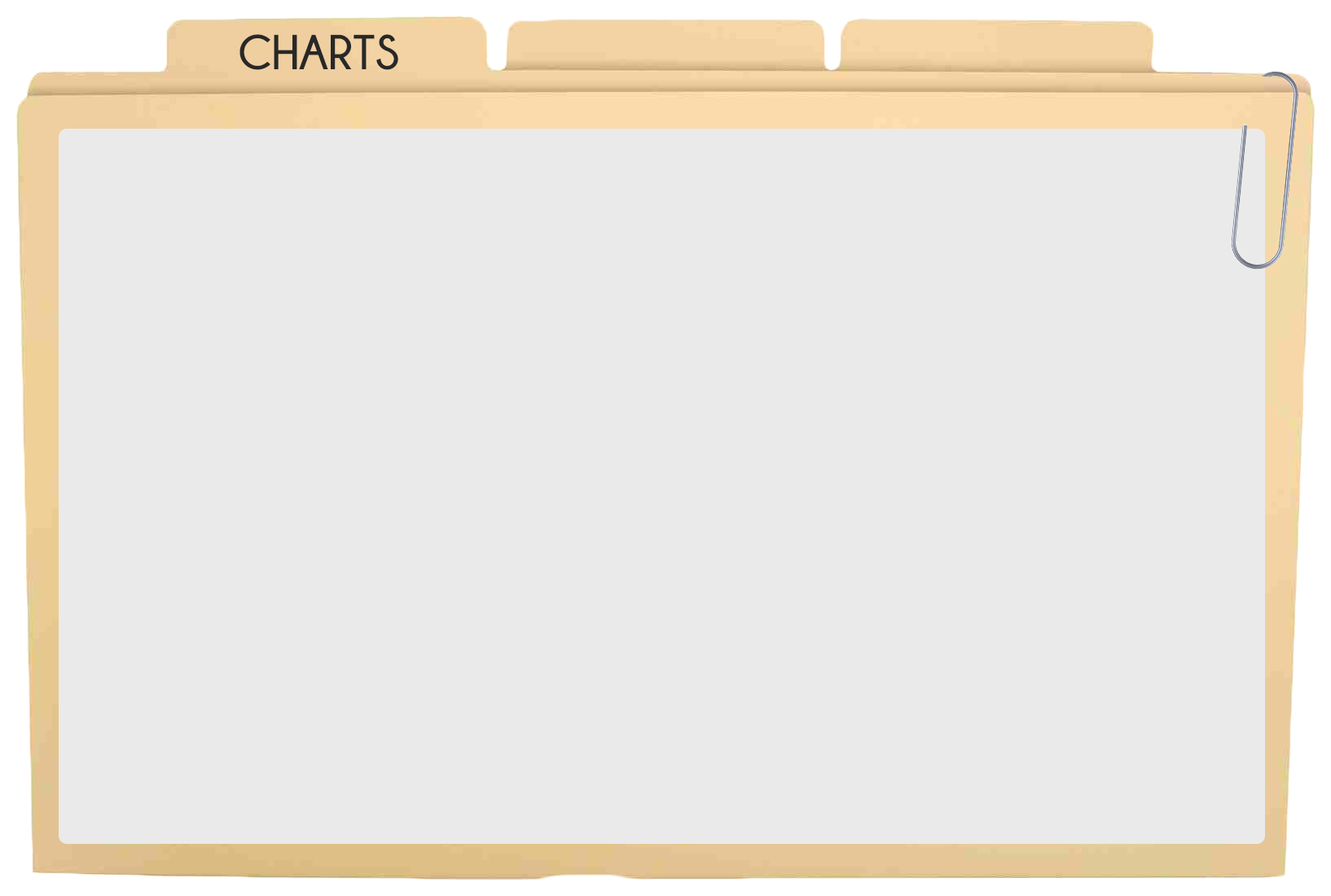
<style>
.page{position:relative;width:1331px;height:896px;background:#eaeaea}
.page>*{position:absolute;margin:0}
.t1{font:48.9px "Champagne&Limousines-Bold";color:#282828}
</style>
<div class="page">
<p class="t1" style="left:239px;top:34px;width:159px;height:36px">CHARTS</p>
</div>
